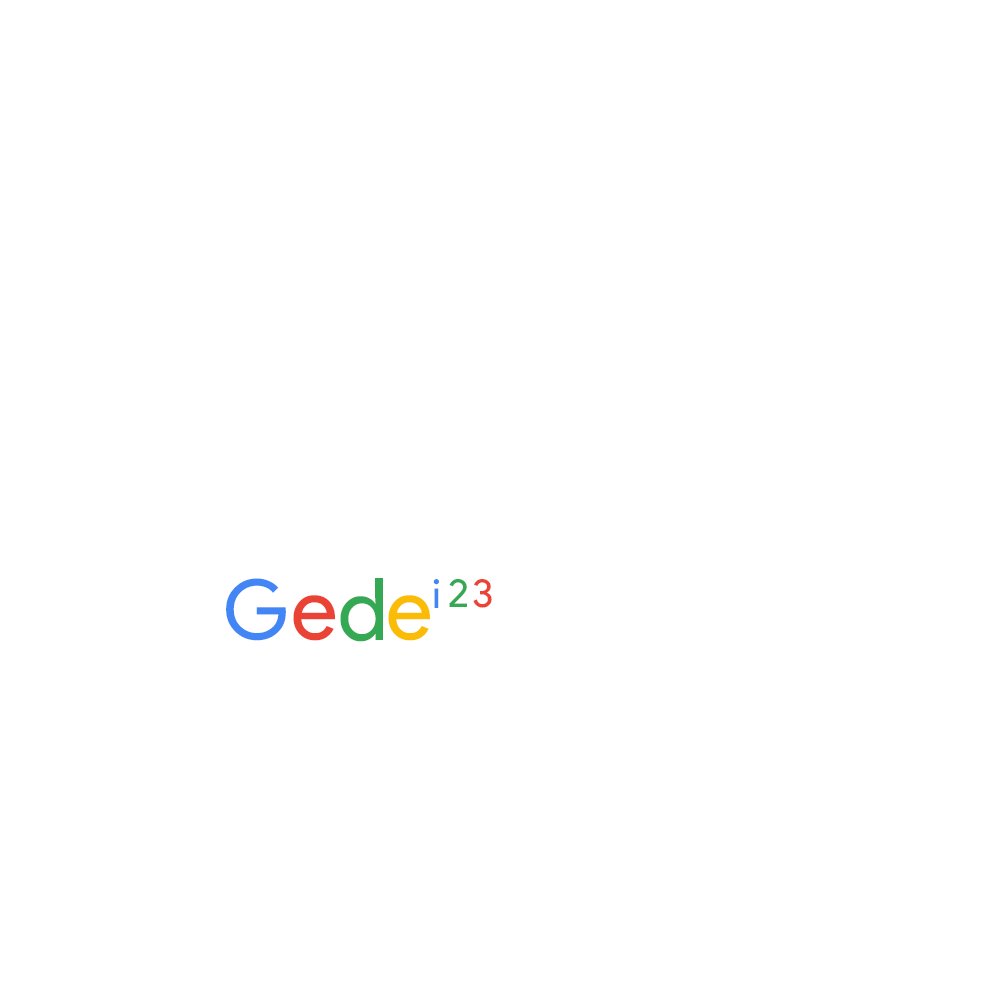
<style>
.page{position:relative;width:1000px;height:1000px;background:#ffffff}
.page>*{position:absolute;margin:0}
.t1{font:82.7px "ProductSans-Regular";color:#4285f4}
.t2{font:86.7px "ProductSans-Regular";color:#34a853}
.t3{font:40px "ProductSans-Regular";color:#4285f4}
.t4{font:40px "ProductSans-Regular";color:#34a853}
.t5{font:40px "ProductSans-Regular";color:#ea4435}
.t6{font:86.7px "ProductSans-Regular";color:#ea4335}
.t7{font:86.7px "ProductSans-Regular";color:#fbbc05}
</style>
<div class="page">
<p class="t1" style="left:226px;top:578px;width:60px;height:63px">G</p>
<p class="t2" style="left:340px;top:578px;width:43px;height:64px">d</p>
<p class="t3" style="left:433px;top:579px;width:6px;height:29px">i</p>
<p class="t4" style="left:449px;top:579px;width:18px;height:28px">2</p>
<p class="t5" style="left:473px;top:579px;width:19px;height:29px">3</p>
<p class="t6" style="left:293px;top:595px;width:42px;height:46px">e</p>
<p class="t7" style="left:388px;top:595px;width:42px;height:46px">e</p>
</div>
